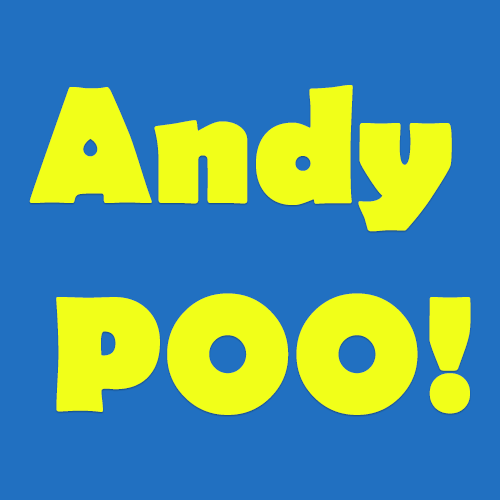
<style>
.page{position:relative;width:500px;height:500px;background:#2170c1}
.page>*{position:absolute;margin:0}
.t1{font:166.7px/208.3px "BerlinSansFB-Bold";color:#f1ff19}
</style>
<div class="page">
<p class="t1" style="left:29px;top:85px;width:442px;height:330px;text-align:center">Andy <br>POO!</p>
</div>
